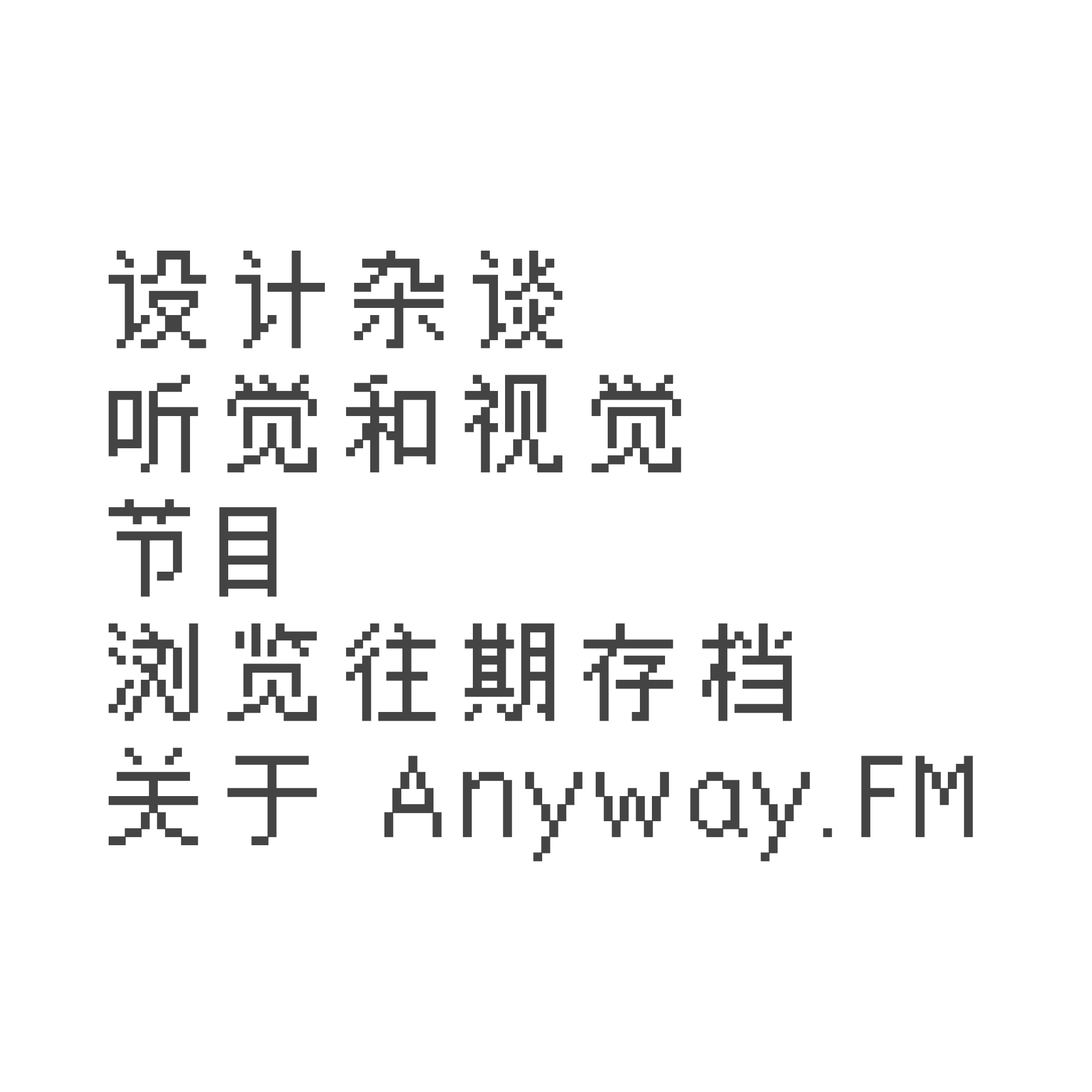
<style>
.page{position:relative;width:1092px;height:1092px;background:#ffffff}
.page>*{position:absolute;margin:0}
.t1{font:120.7px/124.3px "Anyway.V-Regular";letter-spacing:0.05em;color:#444444}
</style>
<div class="page">
<p class="t1" style="left:109px;top:251px;width:864px;height:611px">设计杂谈<br>听觉和视觉<br>节目<br>浏览往期存档<br>关于 Anyway.FM</p>
</div>
